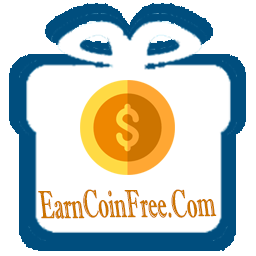
<style>
.page{position:relative;width:256px;height:256px;background:#ffffff}
.page>*{position:absolute;margin:0}
.t1{font:38.9px "ImprintMT-Shadow";color:#cc7400;scale:0.53 1}
</style>
<div class="page">
<p class="t1" style="left:38px;top:189px;width:179px;height:30px">EarnCoinFree.Com</p>
</div>
